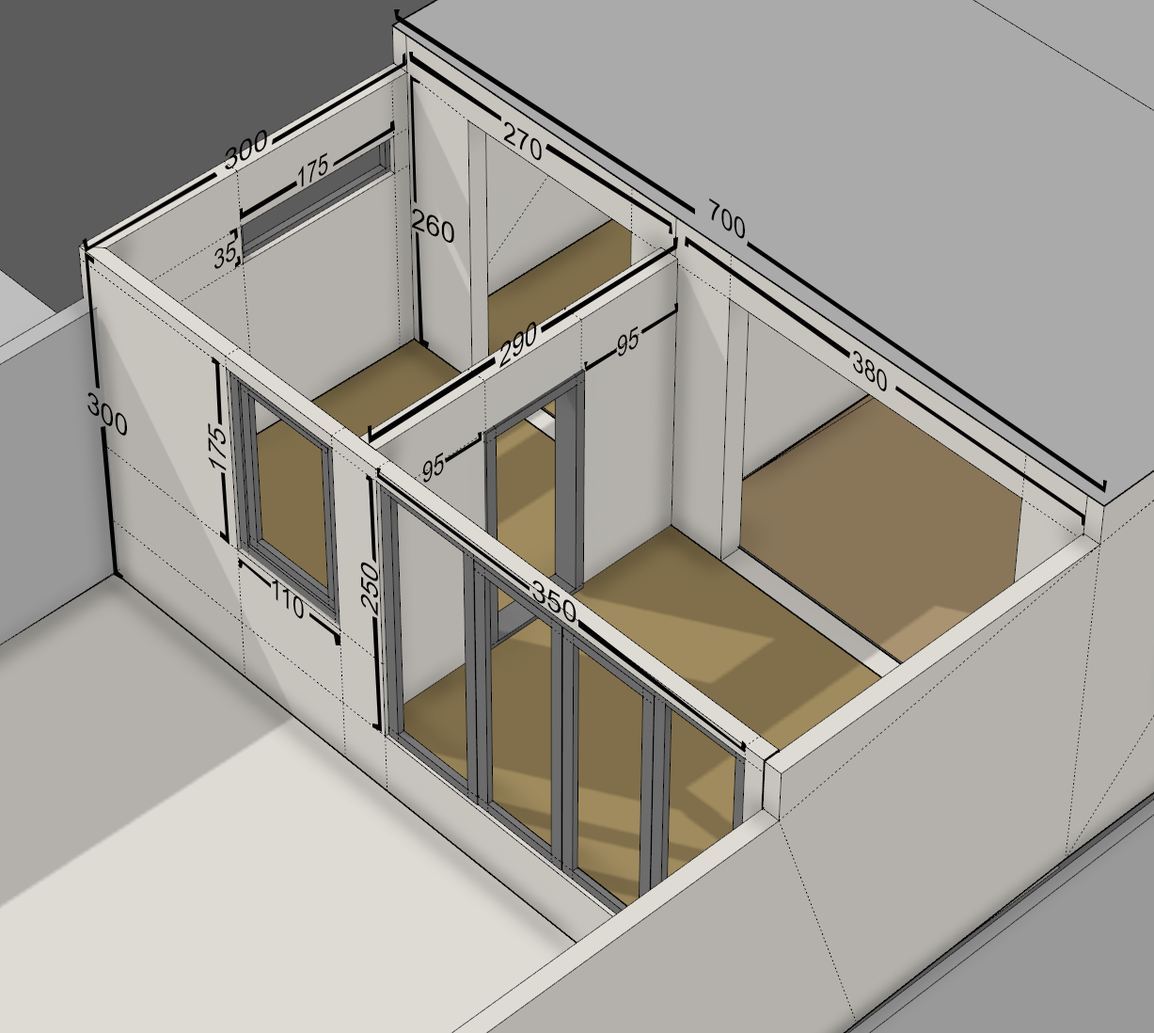
<style>
.page{position:relative;width:1154px;height:1033px;background:#b4b1ac}
.page>*{position:absolute;margin:0}
.t1{font:28.2px "ArialMT";color:#000000}
.t2{font:28.2px "ArialMT";color:#000000;scale:1.08 1}
.t3{font:28.2px "ArialMT";color:#000000;scale:0.78 1}
.t4{font:28.2px "ArialMT";color:#000000;scale:0.95 1}
.t5{font:26.6px "ArialMT";color:#000000;scale:0.89 1}
.t6{font:31.5px "ArialMT";color:#000000;scale:0.9 1}
.t7{font:28.2px "ArialMT";color:#000000;scale:0.82 1}
.t8{font:28.2px "ArialMT";color:#000000;scale:0.94 1}
.t9{font:28.2px "ArialMT";color:#000000;scale:1.09 1}
.t10{font:29px "ArialMT";color:#000000}
.t11{font:28.3px "ArialMT";color:#000000}
.t12{font:28.2px "ArialMT";color:#000000;scale:1.14 1}
</style>
<div class="page">
<p class="t1" style="left:503px;top:121px;width:39px;height:40px;rotate:31deg">270</p>
<p class="t2" style="left:225px;top:130px;width:42px;height:39px;rotate:-30deg">300</p>
<p class="t3" style="left:298px;top:152px;width:30px;height:35px;rotate:-29deg">175</p>
<p class="t4" style="left:709px;top:198px;width:36px;height:41px;rotate:33deg">700</p>
<p class="t1" style="left:411px;top:209px;width:43px;height:34px;rotate:22deg">260</p>
<p class="t5" style="left:215px;top:240px;width:21px;height:29px;rotate:-30deg">35</p>
<p class="t6" style="left:500px;top:322px;width:37px;height:47px;rotate:-36deg">290</p>
<p class="t7" style="left:617px;top:326px;width:22px;height:31px;rotate:-31deg">95</p>
<p class="t8" style="left:853px;top:350px;width:34px;height:41px;rotate:36deg">380</p>
<p class="t9" style="left:87px;top:392px;width:40px;height:44px;rotate:36deg">300</p>
<p class="t10" style="left:208px;top:422px;width:19px;height:49px;rotate:-91deg">175</p>
<p class="t7" style="left:422px;top:452px;width:22px;height:31px;rotate:-31deg">95</p>
<p class="t11" style="left:360px;top:562px;width:18px;height:54px;rotate:-90deg">250</p>
<p class="t1" style="left:272px;top:580px;width:32px;height:39px;rotate:38deg">110</p>
<p class="t12" style="left:532px;top:580px;width:45px;height:43px;rotate:32deg">350</p>
</div>
